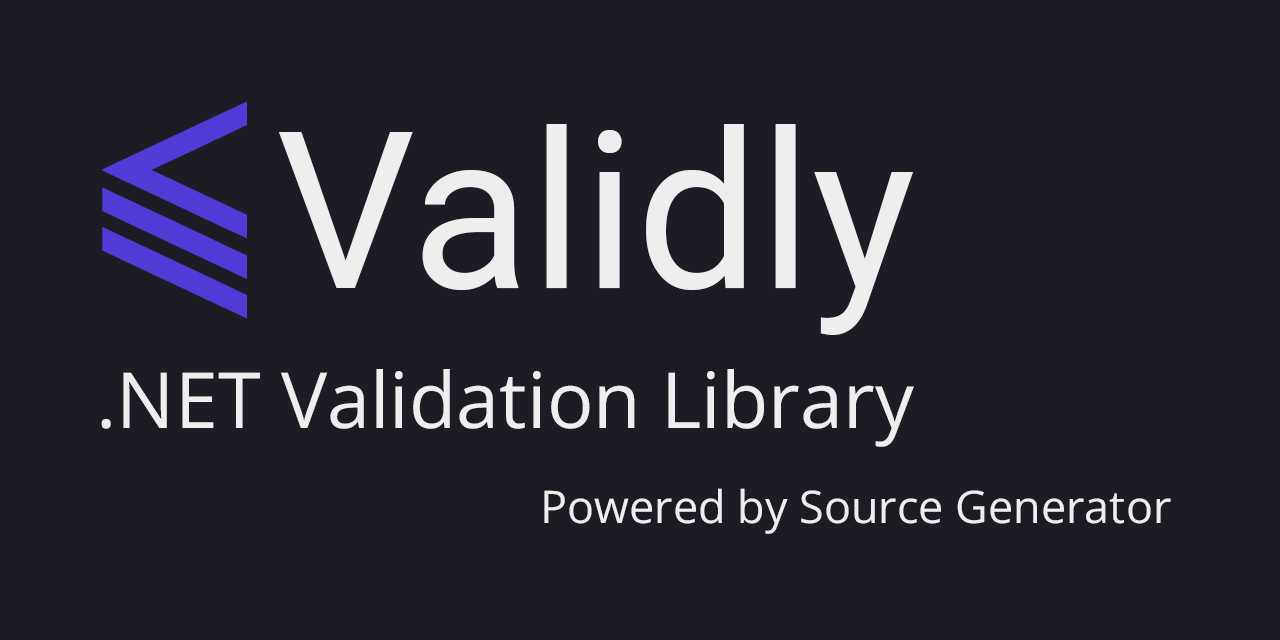
<style>
.page{position:relative;width:1280px;height:640px;background:#1d1c25}
.page>*{position:absolute;margin:0}
.t1{font:219px "Roboto-Regular";color:#eeeeee}
.t2{font:77.6px "OpenSans-Regular";color:#eeeeee}
.t3{font:45.1px "OpenSans-Regular";color:#eeeeee}
</style>
<div class="page">
<p class="t1" style="left:279px;top:124px;width:634px;height:211px">Validly</p>
<p class="t2" style="left:101px;top:369px;width:813px;height:78px">.NET Validation Library</p>
<p class="t3" style="left:544px;top:488px;width:627px;height:46px">Powered by Source Generator</p>
</div>
